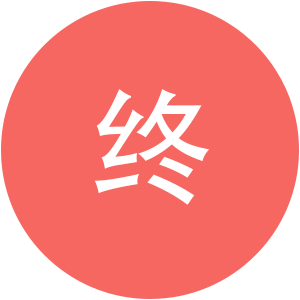
<style>
.page{position:relative;width:300px;height:300px;background:#f76762}
.page>*{position:absolute;margin:0}
.t1{font:124.7px "AdobeHeitiStd-Regular";color:#ffffff}
</style>
<div class="page">
<p class="t1" style="left:95px;top:89px;width:115px;height:116px">终</p>
</div>
